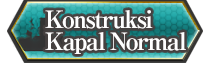
<style>
.page{position:relative;width:210px;height:63px}
.page>*{position:absolute;margin:0}
.t1{font:24px/22px "RyuminPro-ExBold";letter-spacing:-0.08em;color:#ffffff}
</style>
<div class="page">
<p class="t1" style="left:45px;top:10px;width:141px;height:44px">Konstruksi <br>Kapal Normal</p>
</div>
